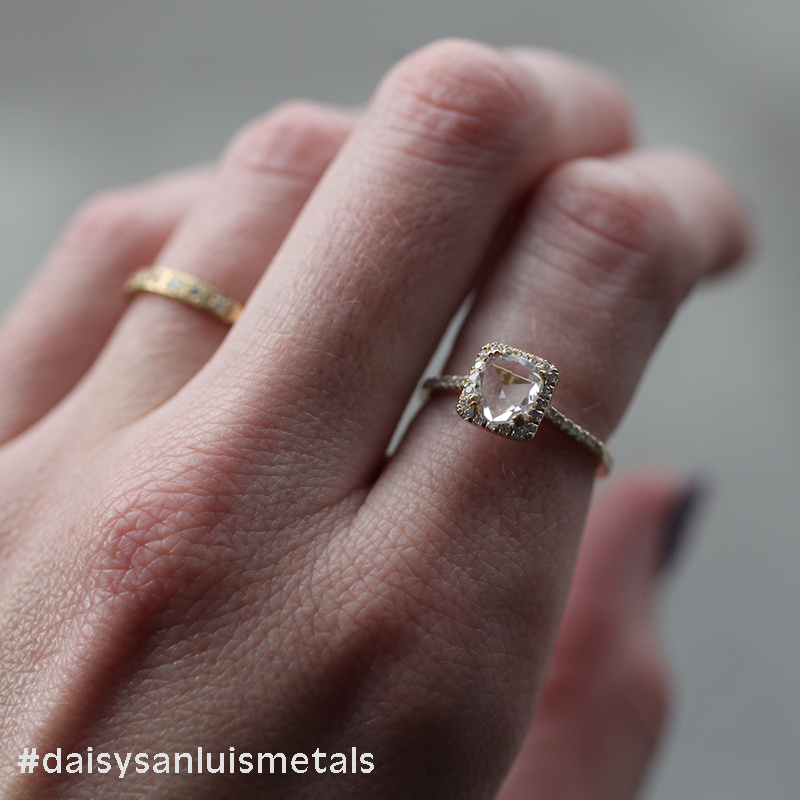
<style>
.page{position:relative;width:800px;height:800px}
.page>*{position:absolute;margin:0}
.t1{font:37px "AntiqueOli-Reg";letter-spacing:0.05em;color:#e1e1e1}
</style>
<div class="page">
<p class="t1" style="left:18px;top:747px;width:356px;height:31px">#daisysanluismetals</p>
</div>
